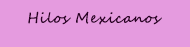
<style>
.page{position:relative;width:190px;height:47px;background:#e59bdf}
.page>*{position:absolute;margin:0}
.t1{font:14px "SegoeScript";letter-spacing:0.05em;color:#290023}
.t2{font:14px "PalaceScriptMT";letter-spacing:0.05em;color:#290023}
</style>
<div class="page">
<p class="t1" style="left:28px;top:11px;width:134px;height:14px"><span class="t2">                                             </span>Hilos Mexicanos</p>
</div>
